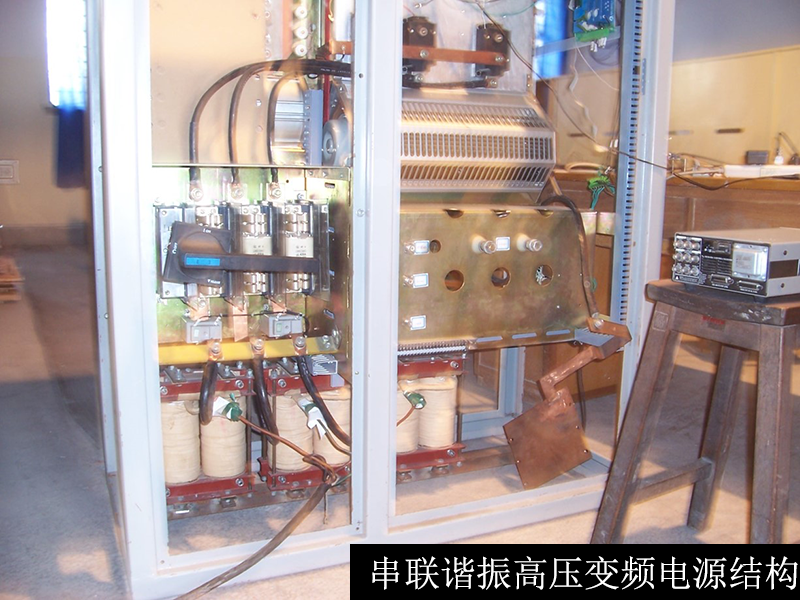
<style>
.page{position:relative;width:800px;height:600px}
.page>*{position:absolute;margin:0}
.t1{font:36px "SimSun";color:#ffffff}
</style>
<div class="page">
<p class="t1" style="left:372px;top:556px;width:426px;height:34px">串联谐振高压变频电源结构</p>
</div>
